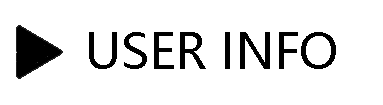
<style>
.page{position:relative;width:383px;height:105px;background:#ffffff}
.page>*{position:absolute;margin:0}
.t1{font:48px "MicrosoftYaHei";color:#000000}
</style>
<div class="page">
<p class="t1" style="left:89px;top:32px;width:247px;height:37px">USER INFO</p>
</div>
